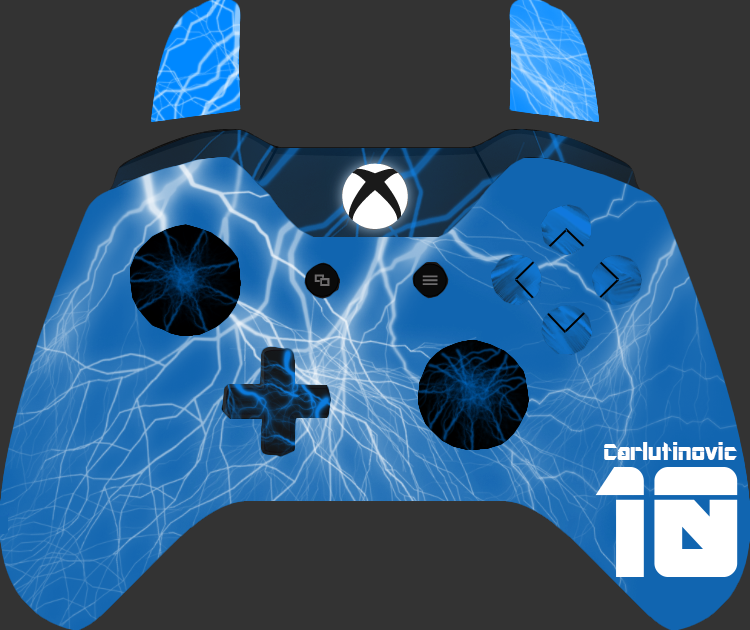
<style>
.page{position:relative;width:750px;height:630px;background:#333333}
.page>*{position:absolute;margin:0}
.t1{font:25px "ARDESTINE";color:#ffffff}
</style>
<div class="page">
<p class="t1" style="left:604px;top:442px;width:133px;height:18px">Carlutinovic</p>
</div>
